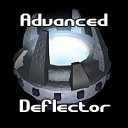
<style>
.page{position:relative;width:128px;height:128px;background:#000000}
.page>*{position:absolute;margin:0}
.t1{font:18px "GravitateBRK";color:#ffffff}
</style>
<div class="page">
<p class="t1" style="left:20px;top:13px;width:88px;height:13px">Advanced</p>
<p class="t1" style="left:19px;top:99px;width:92px;height:13px">Deflector</p>
</div>
